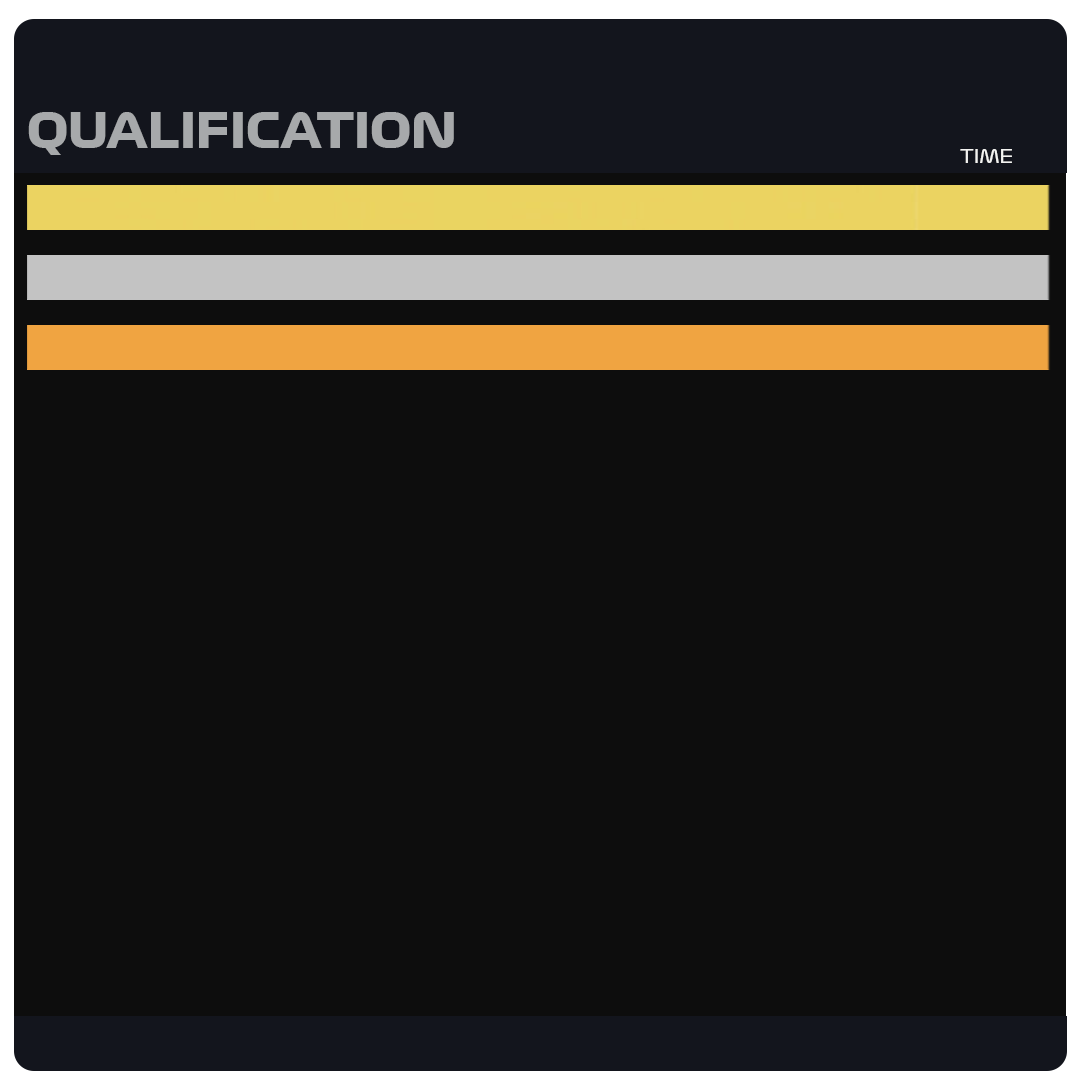
<style>
.page{position:relative;width:1080px;height:1080px;background:#0d0d0d}
.page>*{position:absolute;margin:0}
.t1{font:47.2px "Formula1-Display-Bold";color:#a7a9ab}
.t2{font:17.6px "Formula1-Display-Regular";color:#f3f3f1}
</style>
<div class="page">
<p class="t1" style="left:28px;top:112px;width:426px;height:43px">QUALIFICATION</p>
<p class="t2" style="left:960px;top:149px;width:52px;height:14px">TIME</p>
</div>
